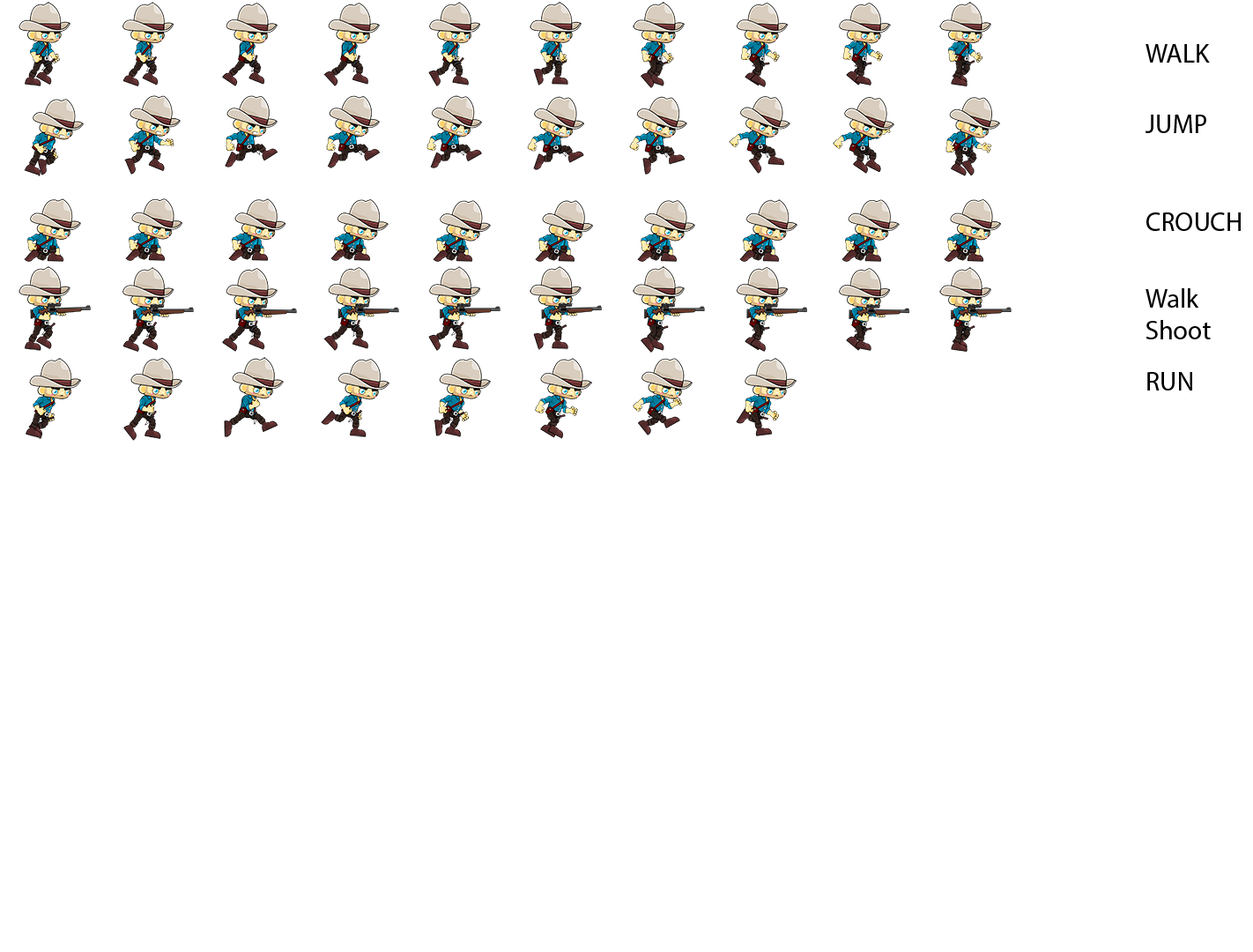
<style>
.page{position:relative;width:1253px;height:952px;background:#ffffff}
.page>*{position:absolute;margin:0}
.t1{font:26.4px "MyriadPro-Regular";color:#000000}
</style>
<div class="page">
<p class="t1" style="left:1146px;top:44px;width:64px;height:19px">WALK</p>
<p class="t1" style="left:1146px;top:115px;width:60px;height:18px">JUMP</p>
<p class="t1" style="left:1146px;top:212px;width:95px;height:19px">CROUCH</p>
<p class="t1" style="left:1146px;top:288px;width:65px;height:51px">Walk<br>Shoot</p>
<p class="t1" style="left:1147px;top:372px;width:45px;height:18px">RUN</p>
</div>
